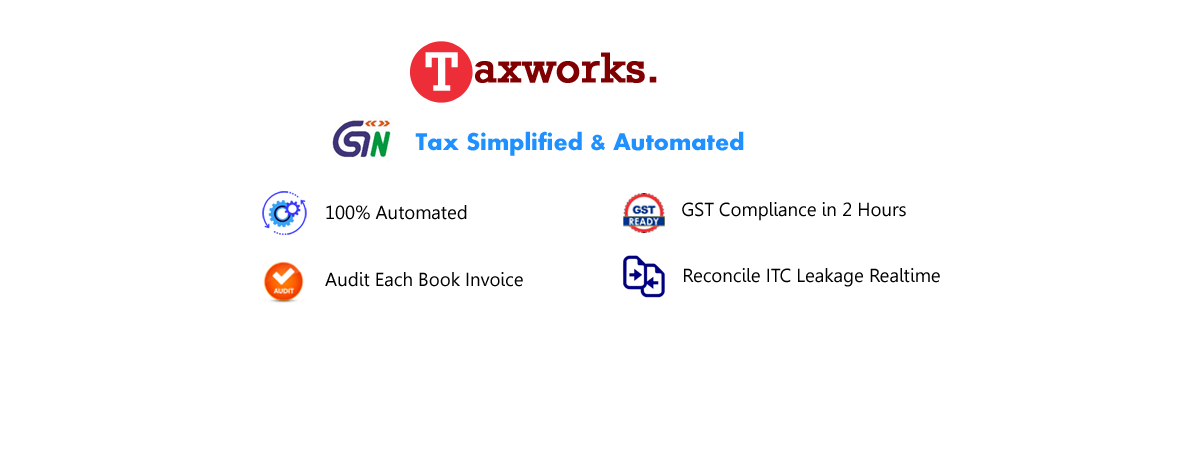
<style>
.page{position:relative;width:1200px;height:450px;background:#ffffff}
.page>*{position:absolute;margin:0}
.t1{font:55.5px "Rockwell";color:#ffffff;font-weight:bold}
.t2{font:43.1px "Rockwell";color:#800001;font-weight:bold}
.t3{font:25px "Aharoni-Bold";color:#1e90ff}
.t4{font:18.7px "Gisha";color:#000000}
</style>
<div class="page">
<p class="t1" style="left:425px;top:52px;width:33px;height:39px">T</p>
<p class="t2" style="left:475px;top:52px;width:182px;height:31px">axworks.</p>
<p class="t3" style="left:415px;top:131px;width:329px;height:25px">Tax Simplified &amp; Automated</p>
<p class="t4" style="left:326px;top:205px;width:141px;height:15px">100% Automated</p>
<p class="t4" style="left:682px;top:202px;width:224px;height:19px">GST Compliance in 2 Hours</p>
<p class="t4" style="left:684px;top:268px;width:256px;height:19px">Reconcile ITC Leakage Realtime</p>
<p class="t4" style="left:325px;top:272px;width:198px;height:15px">Audit Each Book Invoice</p>
</div>
